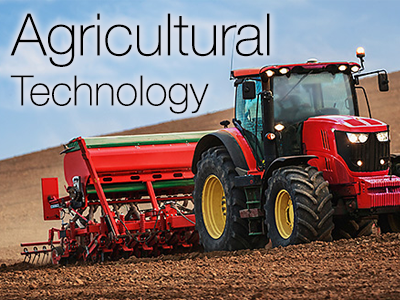
<style>
.page{position:relative;width:400px;height:300px}
.page>*{position:absolute;margin:0}
.t1{font:58.3px "HelveticaNeue-Thin";color:#000000}
.t2{font:41.7px "HelveticaNeue-Thin";color:#000000}
</style>
<div class="page">
<p class="t1" style="left:10px;top:13px;width:260px;height:101px">Agricultural<span class="t2"><br>Technology</span></p>
</div>
